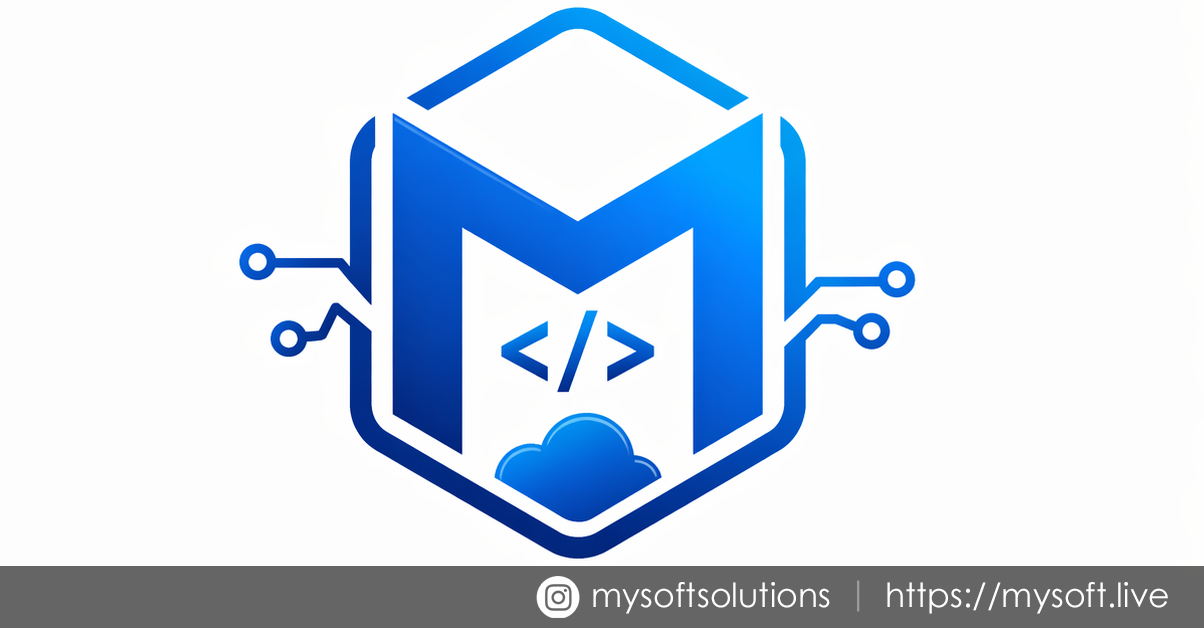
<style>
.page{position:relative;width:1204px;height:628px;background:#fefdfd}
.page>*{position:absolute;margin:0}
.t1{font:33.3px "CenturyGothic";color:#ffffff}
.t2{font:33.3px "CenturyGothic";color:#9b9b9b}
</style>
<div class="page">
<p class="t1" style="left:593px;top:582px;width:237px;height:32px">mysoftsolutions</p>
<p class="t2" style="left:857px;top:580px;width:3px;height:32px">|</p>
<p class="t1" style="left:887px;top:582px;width:281px;height:32px">https://mysoft.live</p>
</div>
